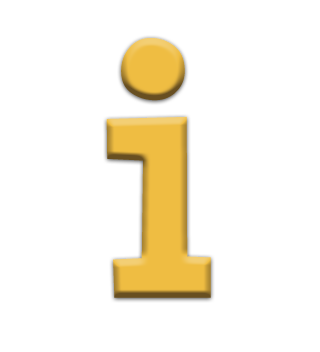
<style>
.page{position:relative;width:320px;height:352px;background:#ffffff}
.page>*{position:absolute;margin:0}
.t1{font:422px "FinkHeavy";color:#efbd42}
</style>
<div class="page">
<p class="t1" style="left:106px;top:38px;width:105px;height:260px">i</p>
</div>
